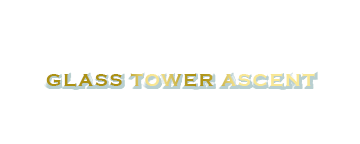
<style>
.page{position:relative;width:360px;height:144px;background:#ffffff}
.page>*{position:absolute;margin:0}
.t1{font:18px "CopperplateGothic-Bold";letter-spacing:0.1em}
</style>
<div class="page">
<p class="t1" style="left:46px;top:73px;width:269px;height:14px">GLASS TOWER ASCENT</p>
</div>
